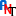
<style>
.page{position:relative;width:16px;height:16px;background:#ffffff}
.page>*{position:absolute;margin:0}
.t1{font:12.8px "Krungthep";color:#0066cc}
.t2{font:12.8px "Monaco";color:#ff0000}
.t3{font:12.8px "CalistoMT";color:#000000}
</style>
<div class="page">
<p class="t1" style="left:0px;top:0px;width:7px;height:10px">A</p>
<p class="t2" style="left:4px;top:4px;width:8px;height:10px">N</p>
<p class="t3" style="left:8px;top:7px;width:9px;height:10px">T</p>
</div>
